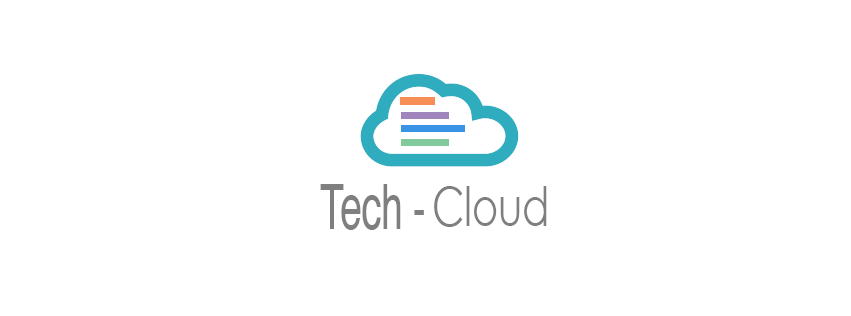
<style>
.page{position:relative;width:851px;height:316px;background:#ffffff}
.page>*{position:absolute;margin:0}
.t1{font:71.4px "HacenPromoterLt";color:#807f7f;scale:0.63 1}
.t2{font:54px "CenturyGothic";color:#807f7f;scale:0.74 1}
</style>
<div class="page">
<p class="t1" style="left:320px;top:184px;width:104px;height:46px">Tech -</p>
<p class="t2" style="left:434px;top:186px;width:113px;height:41px">Cloud</p>
</div>
